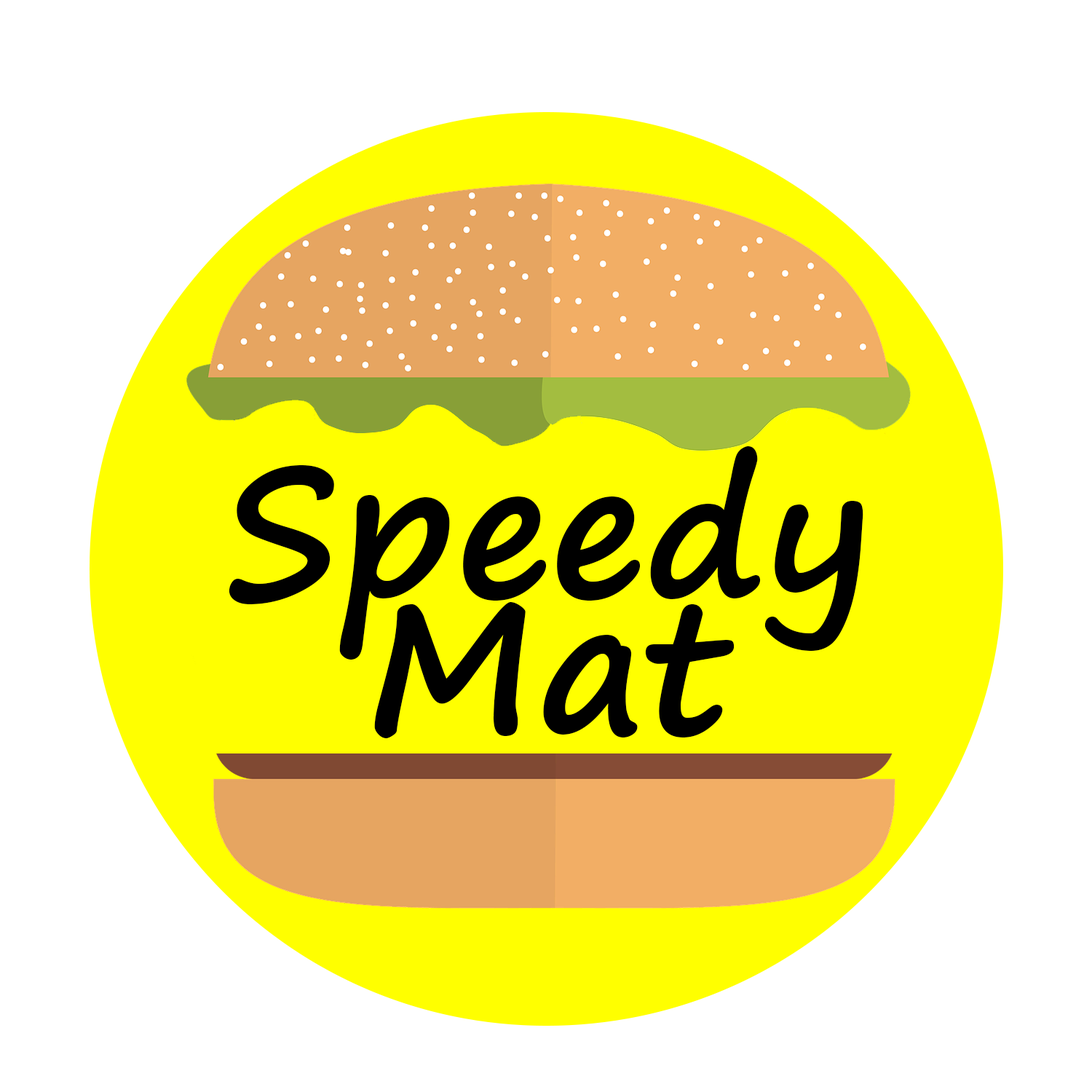
<style>
.page{position:relative;width:1092px;height:1092px;background:#ffffff}
.page>*{position:absolute;margin:0}
.t1{font:182px "SegoePrint-Bold";color:#000000}
</style>
<div class="page">
<p class="t1" style="left:229px;top:446px;width:634px;height:214px">Speedy</p>
<p class="t1" style="left:374px;top:602px;width:361px;height:137px">Mat</p>
</div>
